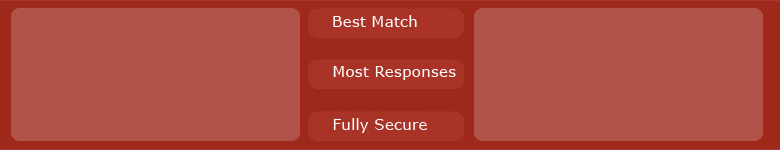
<style>
.page{position:relative;width:780px;height:150px;background:#b15348}
.page>*{position:absolute;margin:0}
.t1{font:15.5px "Verdana";color:#ffffff}
</style>
<div class="page">
<p class="t1" style="left:333px;top:15px;width:84px;height:12px">Best Match</p>
<p class="t1" style="left:333px;top:66px;width:123px;height:14px">Most Responses</p>
<p class="t1" style="left:333px;top:118px;width:94px;height:15px">Fully Secure</p>
</div>
